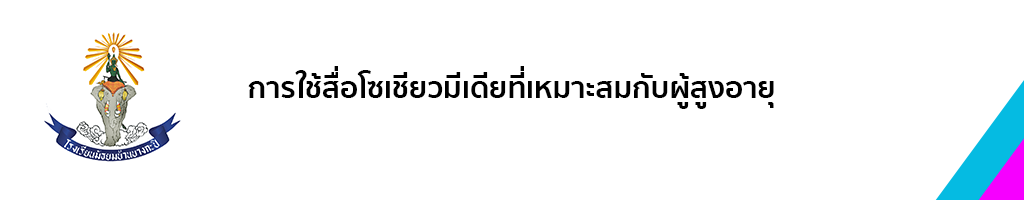
<style>
.page{position:relative;width:1024px;height:200px;background:#ffffff}
.page>*{position:absolute;margin:0}
.t1{font:30px "SukhumvitSet-Bold";color:#000000}
</style>
<div class="page">
<p class="t1" style="left:248px;top:66px;width:526px;height:43px">การใช้สื่อโซเชียวมีเดียที่เหมาะสมกับผู้สูงอายุ</p>
</div>
